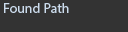
<style>
.page{position:relative;width:128px;height:32px;background:#333333}
.page>*{position:absolute;margin:0}
.t1{font:14px "MyriadPro-Regular";color:#ccdced}
</style>
<div class="page">
<p class="t1" style="left:4px;top:3px;width:65px;height:10px">Found Path</p>
</div>
